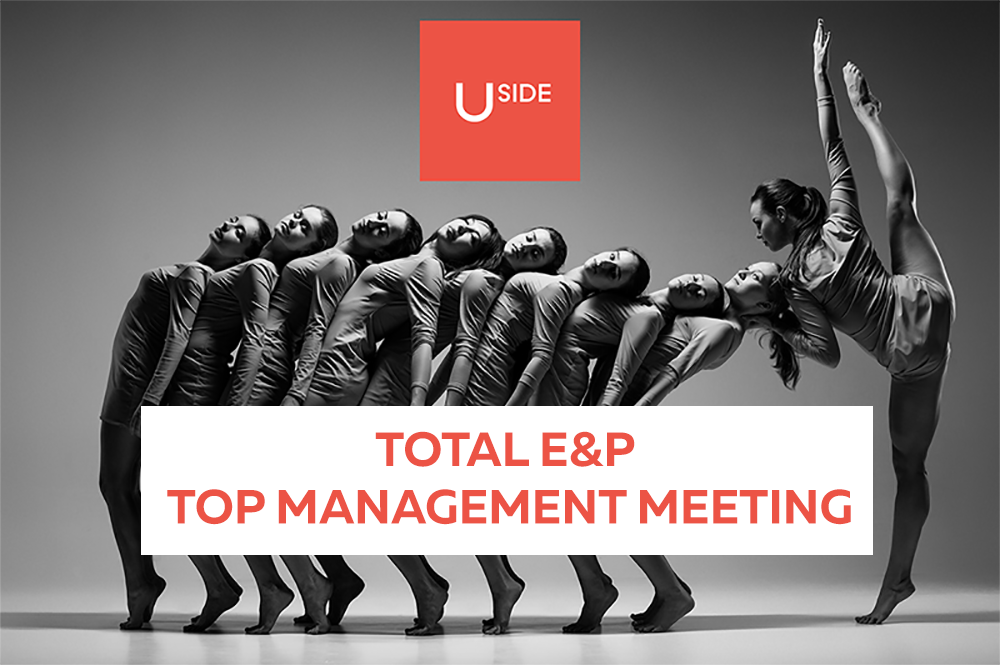
<style>
.page{position:relative;width:1000px;height:665px}
.page>*{position:absolute;margin:0}
.t1{font:48px "MullerBold";color:#ec5345;text-transform:uppercase}
</style>
<div class="page">
<p class="t1" style="left:167px;top:431px;width:684px;height:94px;text-align:center">TOTAL E&amp;P <br>TOP MANAGEMENT MEETING</p>
</div>
